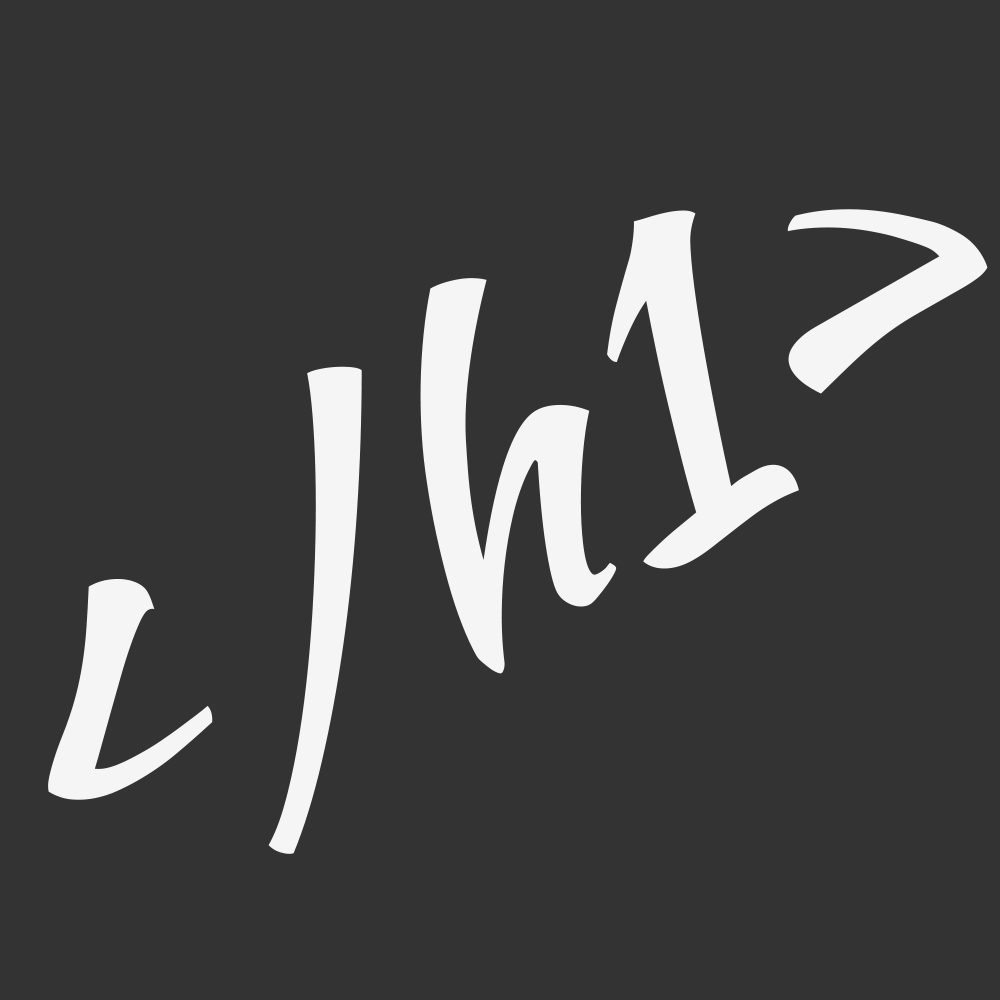
<style>
.page{position:relative;width:1000px;height:1000px;background:#333333}
.page>*{position:absolute;margin:0}
.t1{font:420.8px "KaushanScript-Regular";color:#f5f5f5}
</style>
<div class="page">
<p class="t1" style="left:48px;top:209px;width:940px;height:645px;rotate:-30deg">&lt;/h1&gt;</p>
</div>
